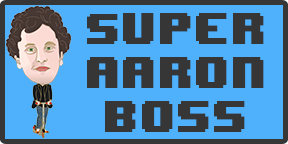
<style>
.page{position:relative;width:288px;height:144px;background:#4fb1fc}
.page>*{position:absolute;margin:0}
.t1{font:36.8px "8BITWONDERNominal";color:#363636}
</style>
<div class="page">
<p class="t1" style="left:87px;top:13px;width:177px;height:119px;text-align:center">Super<br>aaron<br>boss</p>
</div>
